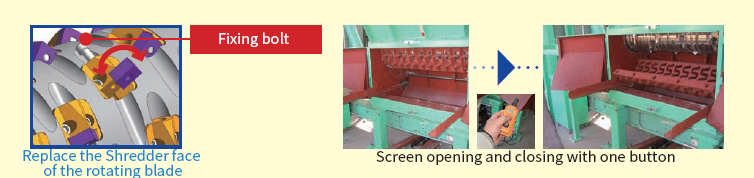
<style>
.page{position:relative;width:754px;height:178px;background:#fffcd6}
.page>*{position:absolute;margin:0}
.t1{font:14.6px "NotoSansCJKkr-Regular";color:#ffffff}
.t2{font:14.6px/14.6px "NotoSansCJKkr-Regular";color:#1e87ce}
.t3{font:14.6px "NotoSansCJKkr-Regular";color:#212121}
</style>
<div class="page">
<p class="t1" style="left:219px;top:32px;width:70px;height:15px">Fixing bolt</p>
<p class="t2" style="left:23px;top:149px;width:177px;height:30px;text-align:center">Replace the Shredder face <br>of the rotating blade</p>
<p class="t3" style="left:376px;top:150px;width:299px;height:15px">Screen opening and closing with one button</p>
</div>
